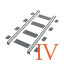
<style>
.page{position:relative;width:64px;height:64px;background:#ffffff}
.page>*{position:absolute;margin:0}
.t1{font:24px "AGaramondPro-Regular";color:#e5653a}
</style>
<div class="page">
<p class="t1" style="left:35px;top:44px;width:24px;height:16px">IV</p>
</div>
